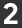
<style>
.page{position:relative;width:22px;height:28px;background:#333333}
.page>*{position:absolute;margin:0}
.t1{font:30px "ProductSans-Bold";color:#ffffff}
</style>
<div class="page">
<p class="t1" style="left:3px;top:3px;width:15px;height:21px">2</p>
</div>
